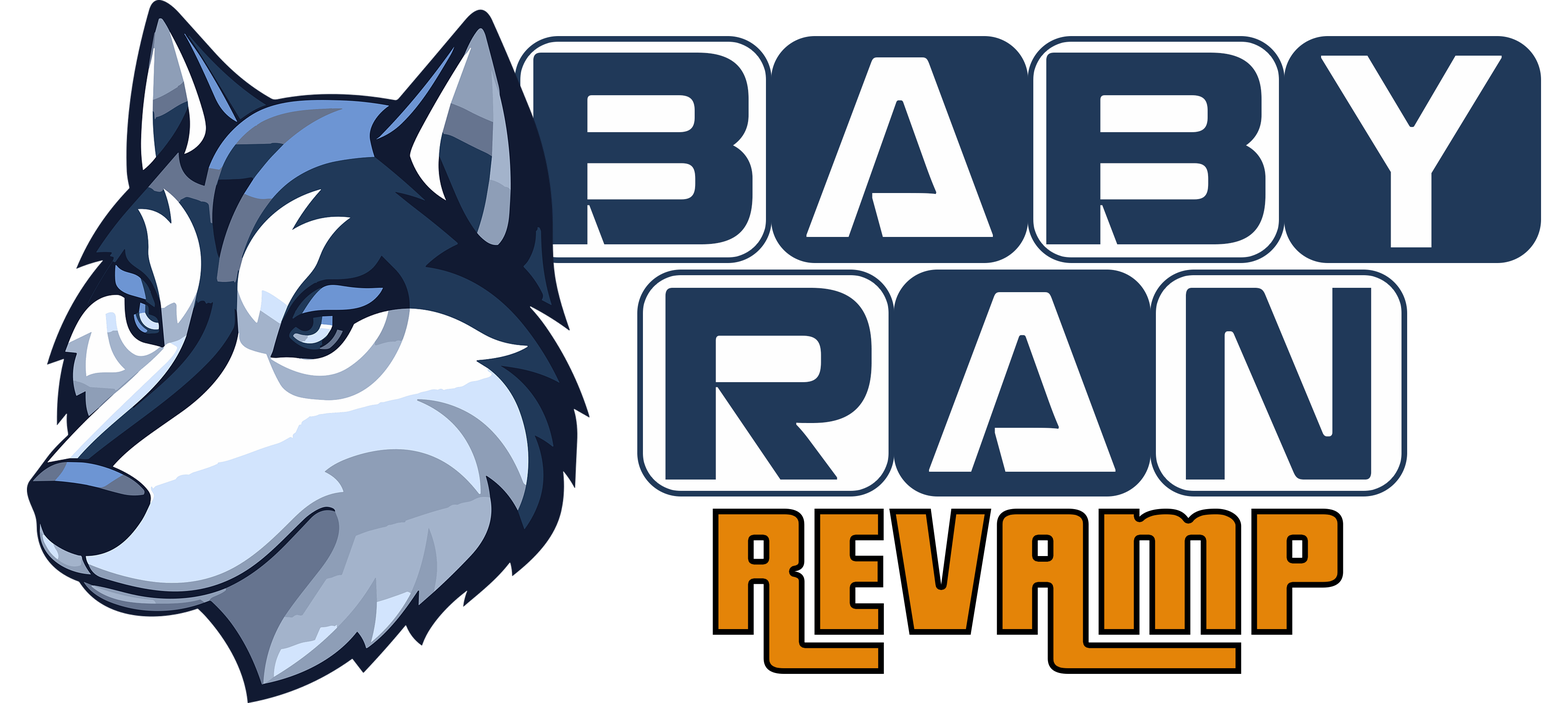
<style>
.page{position:relative;width:1568px;height:703px;background:#ffffff}
.page>*{position:absolute;margin:0}
.t1{font:263.1px "RechargeRg-Bold";color:#203959}
.t2{font:246.6px "RechargeRg-Bold";color:#fefefe;scale:0.72 1}
.t3{font:263.3px "RechargeRg-Bold";color:#fefefe;scale:0.75 1}
.t4{font:263.3px "RechargeRg-Bold";color:#203959;scale:0.93 1}
.t5{font:263.3px "RechargeRg-Bold";color:#203959;scale:0.79 1}
.t6{font:197.6px "PricedownBl-Regular"}
</style>
<div class="page">
<p class="t1" style="left:533px;top:53px;width:220px;height:191px">B</p>
<p class="t1" style="left:1046px;top:53px;width:220px;height:191px">B</p>
<p class="t2" style="left:806px;top:57px;width:187px;height:180px">A</p>
<p class="t3" style="left:1321px;top:56px;width:181px;height:191px">Y</p>
<p class="t4" style="left:665px;top:288px;width:207px;height:191px">R</p>
<p class="t2" style="left:929px;top:292px;width:186px;height:180px">A</p>
<p class="t5" style="left:1186px;top:288px;width:186px;height:191px">N</p>
<p class="t6" style="left:712px;top:509px;width:631px;height:165px">REVAMP</p>
</div>
